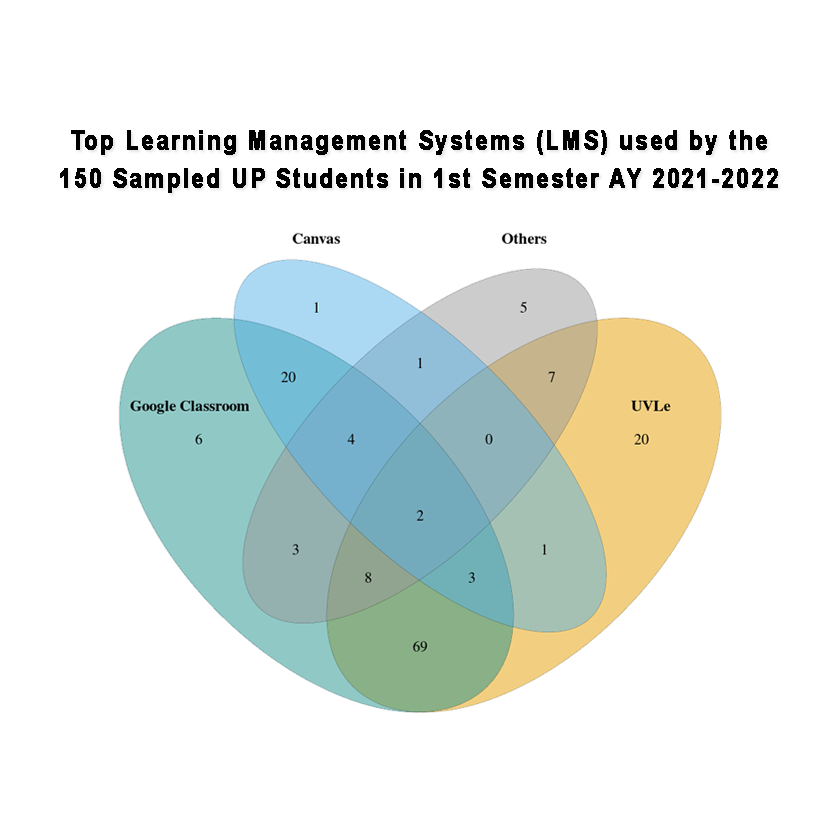
<style>
.page{position:relative;width:840px;height:840px;background:#ffffff}
.page>*{position:absolute;margin:0}
.t1{font:25.6px "Arial-BoldMT";letter-spacing:0.09em;color:#000000;font-weight:bold;scale:0.87 1}
</style>
<div class="page">
<p class="t1" style="left:71px;top:130px;width:696px;height:25px">Top Learning Management Systems (LMS) used by the</p>
<p class="t1" style="left:60px;top:168px;width:718px;height:25px">150 Sampled UP Students in 1st Semester AY 2021-2022</p>
</div>
